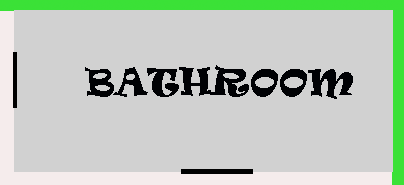
<style>
.page{position:relative;width:404px;height:185px;background:#d1d1d1}
.page>*{position:absolute;margin:0}
.t1{font:36px "Ravie";color:#000104}
</style>
<div class="page">
<p class="t1" style="left:85px;top:65px;width:268px;height:34px">BATHROOM</p>
</div>
